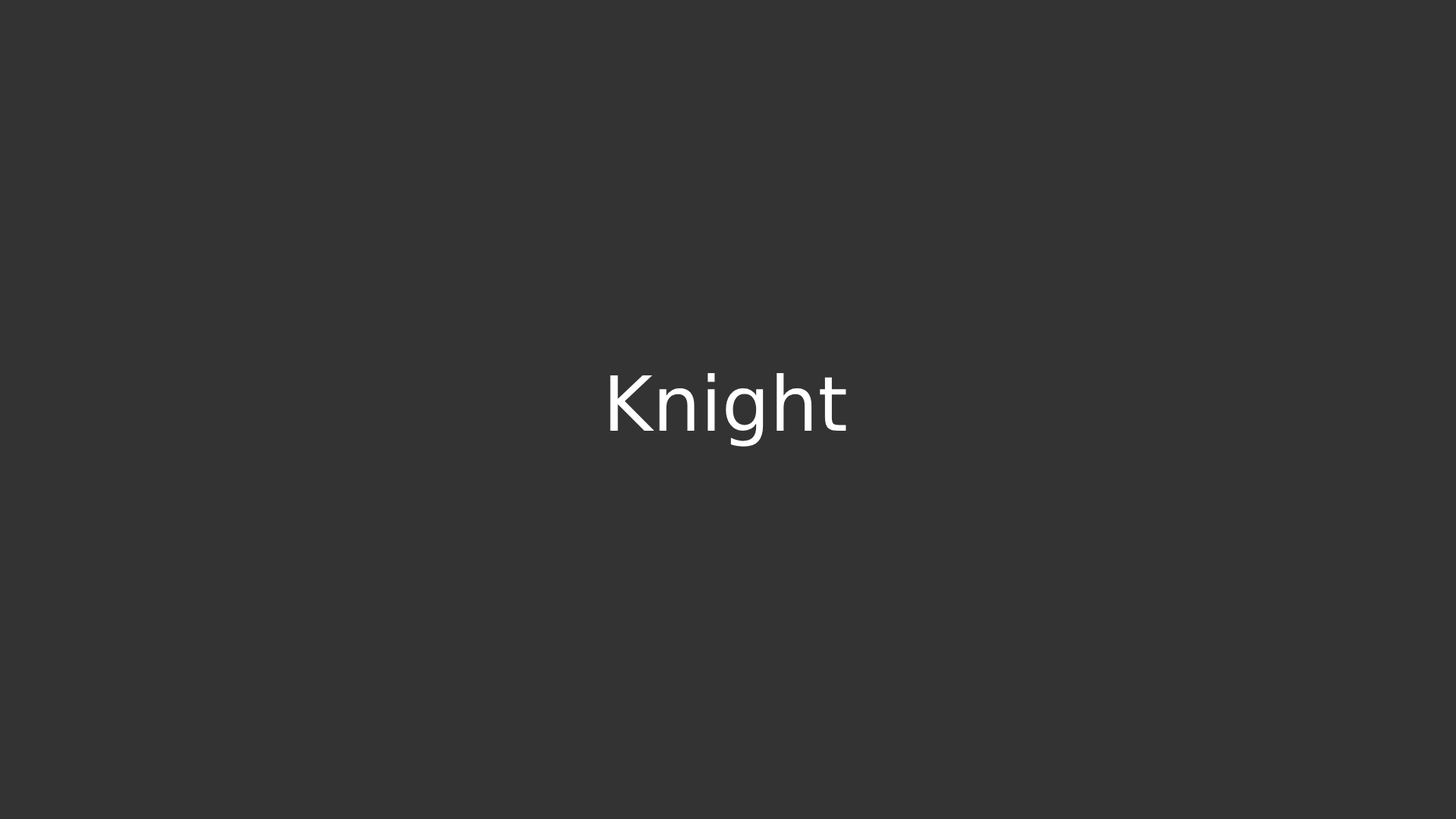
<style>
.page{position:relative;width:1456px;height:819px;background:#333333}
.page>*{position:absolute;margin:0}
.t1{font:75.8px "DejaVuSans";color:#ffffff}
</style>
<div class="page">
<p class="t1" style="left:610px;top:373px;width:236px;height:74px">Knight</p>
</div>
